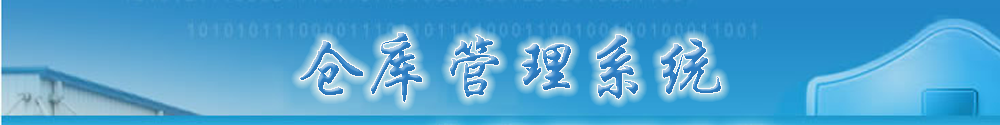
<style>
.page{position:relative;width:1000px;height:125px}
.page>*{position:absolute;margin:0}
.t1{font:72px "STXingkai";color:#2b7fc6}
</style>
<div class="page">
<p class="t1" style="left:300px;top:33px;width:421px;height:69px">仓库管理系统</p>
</div>
